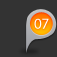
<style>
.page{position:relative;width:57px;height:57px;background:#333333}
.page>*{position:absolute;margin:0}
.t1{font:15px "MyriadPro-Regular";color:#ffffff}
</style>
<div class="page">
<p class="t1" style="left:34px;top:18px;width:15px;height:11px">07</p>
</div>
